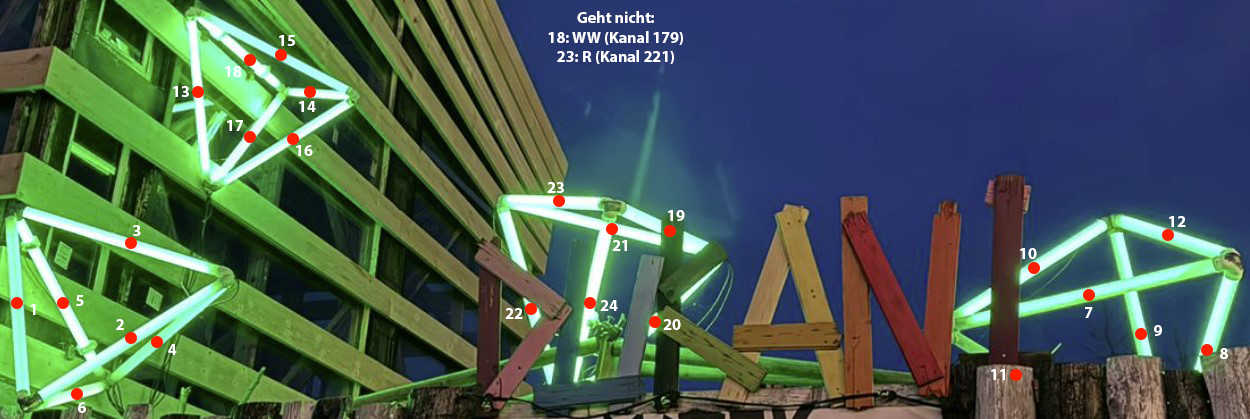
<style>
.page{position:relative;width:1250px;height:419px}
.page>*{position:absolute;margin:0}
.t1{font:16px "MyriadPro-Bold";color:#ffffff}
</style>
<div class="page">
<p class="t1" style="left:548px;top:11px;width:135px;height:53px;text-align:center">Geht nicht: <br>18: WW (Kanal 179)<br>23: R (Kanal 221)</p>
<p class="t1" style="left:279px;top:35px;width:16px;height:11px">15</p>
<p class="t1" style="left:225px;top:66px;width:17px;height:11px">18</p>
<p class="t1" style="left:173px;top:86px;width:16px;height:11px">13</p>
<p class="t1" style="left:299px;top:101px;width:17px;height:11px">14</p>
<p class="t1" style="left:227px;top:120px;width:16px;height:11px">17</p>
<p class="t1" style="left:296px;top:145px;width:17px;height:11px">16</p>
<p class="t1" style="left:547px;top:182px;width:17px;height:11px">23</p>
<p class="t1" style="left:668px;top:210px;width:17px;height:11px">19</p>
<p class="t1" style="left:1169px;top:216px;width:17px;height:11px">12</p>
<p class="t1" style="left:133px;top:225px;width:8px;height:11px">3</p>
<p class="t1" style="left:612px;top:240px;width:15px;height:11px">21</p>
<p class="t1" style="left:1020px;top:248px;width:17px;height:11px">10</p>
<p class="t1" style="left:30px;top:304px;width:6px;height:11px">1</p>
<p class="t1" style="left:76px;top:295px;width:8px;height:11px">5</p>
<p class="t1" style="left:600px;top:300px;width:18px;height:11px">24</p>
<p class="t1" style="left:505px;top:308px;width:18px;height:11px">22</p>
<p class="t1" style="left:1085px;top:307px;width:8px;height:11px">7</p>
<p class="t1" style="left:116px;top:319px;width:8px;height:11px">2</p>
<p class="t1" style="left:663px;top:319px;width:18px;height:11px">20</p>
<p class="t1" style="left:1154px;top:325px;width:8px;height:11px">9</p>
<p class="t1" style="left:168px;top:344px;width:9px;height:11px">4</p>
<p class="t1" style="left:1220px;top:348px;width:8px;height:11px">8</p>
<p class="t1" style="left:991px;top:369px;width:14px;height:11px">11</p>
<p class="t1" style="left:78px;top:402px;width:8px;height:11px">6</p>
</div>
